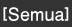
<style>
.page{position:relative;width:72px;height:27px;background:#333333}
.page>*{position:absolute;margin:0}
.t1{font:18px "FutoGoB101Pr5-Bold";color:#ffffff}
.t2{font:14.9px "FutoGoB101Pr5-Bold";color:#ffffff;scale:1.2 1}
</style>
<div class="page">
<p class="t1" style="left:3px;top:7px;width:66px;height:14px"><span class="t2">[</span>Semua<span class="t2">]</span></p>
</div>
